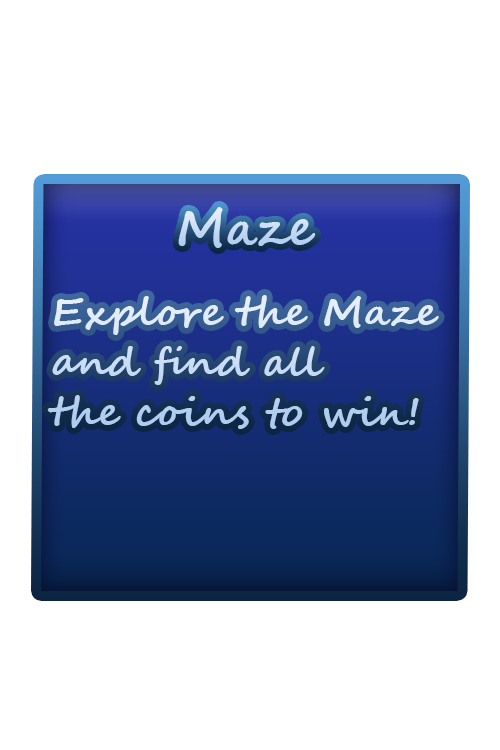
<style>
.page{position:relative;width:500px;height:750px;background:#ffffff}
.page>*{position:absolute;margin:0}
.t1{font:50px "SegoeScript-Bold";color:#c3daf4}
.t2{font:39.2px "SegoeScript-Bold";scale:1.06 1}
</style>
<div class="page">
<p class="t1" style="left:178px;top:207px;width:138px;height:41px">Maze</p>
<p class="t2" style="left:47px;top:295px;width:392px;height:134px">Explore the Maze <br>and find all<br>the coins to win!</p>
</div>
